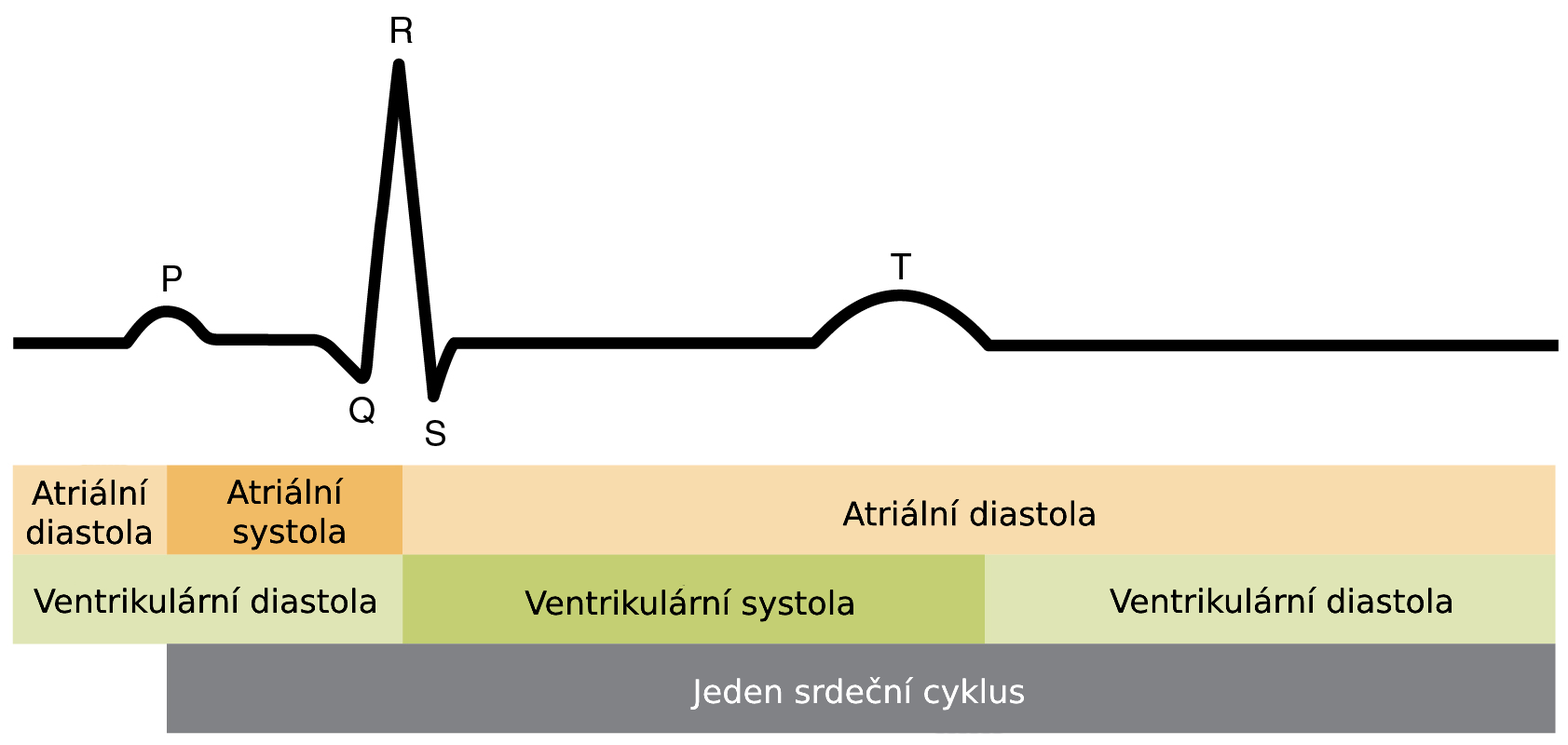
<style>
.page{position:relative;width:1568px;height:745px;background:#ffffff}
.page>*{position:absolute;margin:0}
.t1{font:32.6px "Arial";color:#000000}
.t2{font:32.6px "Arial";color:#ffffff}
</style>
<div class="page">
<p class="t1" style="left:26px;top:479px;width:125px;height:66px;text-align:center">Atriální<br>diastola</p>
<p class="t1" style="left:226px;top:478px;width:119px;height:73px;text-align:center">Atriální<br> systola</p>
<p class="t1" style="left:842px;top:499px;width:253px;height:27px">Atriální diastola</p>
<p class="t1" style="left:34px;top:587px;width:341px;height:27px">Ventrikulární diastola</p>
<p class="t1" style="left:525px;top:589px;width:328px;height:33px">Ventrikulární systola</p>
<p class="t1" style="left:1110px;top:587px;width:342px;height:27px">Ventrikulární diastola</p>
<p class="t2" style="left:690px;top:677px;width:334px;height:34px">Jeden srdeční cyklus</p>
</div>
